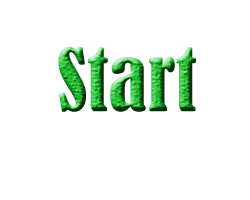
<style>
.page{position:relative;width:250px;height:200px;background:#ffffff}
.page>*{position:absolute;margin:0}
.t1{font:80px "BernardMT-Condensed"}
</style>
<div class="page">
<p class="t1" style="left:58px;top:46px;width:138px;height:66px">Start</p>
</div>
